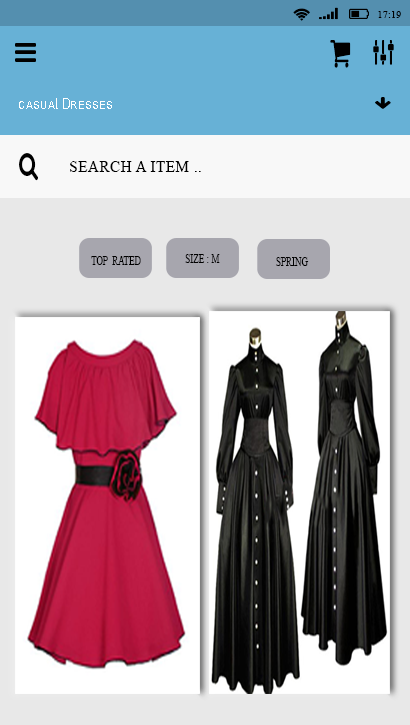
<style>
.page{position:relative;width:410px;height:725px}
.page>*{position:absolute;margin:0}
.t1{font:10px "TimesNewRomanPSMT";letter-spacing:0.025em;color:#000000;text-transform:uppercase}
.t2{font:14.9px "ArialMT";letter-spacing:0.025em;color:#ffffff;font-variant:small-caps;scale:0.81 1}
.t3{font:16px "TimesNewRomanPSMT";letter-spacing:0.025em;color:#000000;text-transform:uppercase;scale:0.96 1}
.t4{font:12px "TimesNewRomanPSMT";letter-spacing:0.025em;color:#000000;text-transform:uppercase;scale:0.71 1}
</style>
<div class="page">
<p class="t1" style="left:378px;top:11px;width:23px;height:7px">17:19</p>
<p class="t2" style="left:19px;top:98px;width:93px;height:11px">casual Dresses</p>
<p class="t3" style="left:70px;top:161px;width:131px;height:11px">Search a item ..</p>
<p class="t4" style="left:91px;top:256px;width:50px;height:9px">top  rated</p>
<p class="t4" style="left:185px;top:254px;width:35px;height:9px">Size : m</p>
<p class="t4" style="left:276px;top:257px;width:33px;height:9px">spring</p>
</div>
